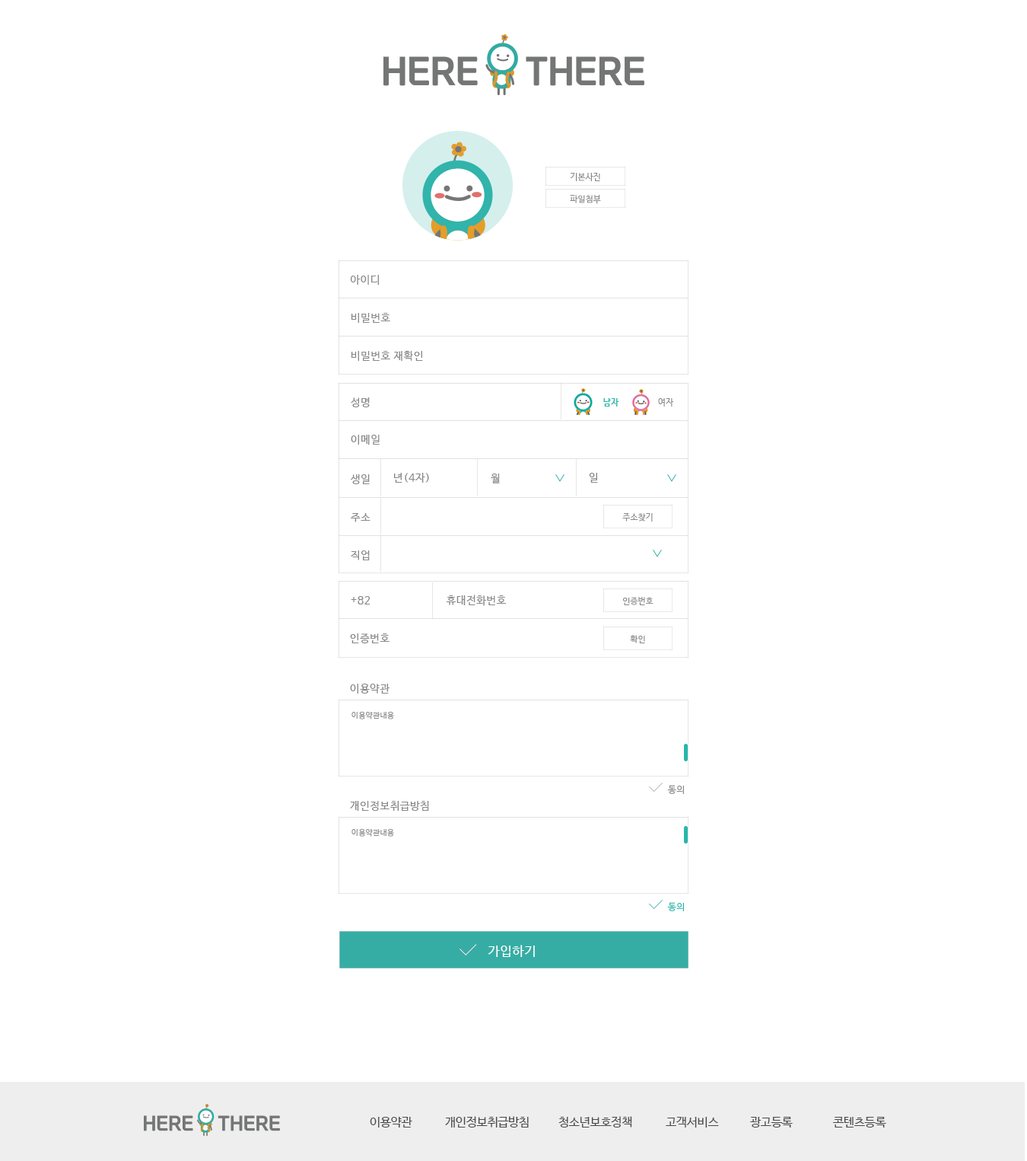
<style>
.page{position:relative;width:1027px;height:1161px;background:#ffffff}
.page>*{position:absolute;margin:0}
.t1{font:8.4px "NanumBarunGothic";letter-spacing:0.025em;color:#898989}
.t2{font:10.7px "NanumBarunGothic";letter-spacing:0.05em;color:#898989}
.t3{font:8.4px "NanumBarunGothicBold";letter-spacing:0.05em;color:#25b7aa}
.t4{font:8.4px "NanumBarunGothic";letter-spacing:0.05em;color:#898989}
.t5{font:7.6px "NanumBarunGothic";letter-spacing:0.05em;color:#898989}
.t6{font:9.1px "NanumBarunGothic";letter-spacing:0.05em;color:#898989}
.t7{font:9.1px "NanumBarunGothic";letter-spacing:0.05em;color:#25b7aa}
.t8{font:12.9px "NanumBarunGothic";letter-spacing:0.05em;color:#ffffff}
.t9{font:12.2px "NanumBarunGothic";letter-spacing:-0.025em;color:#4c4948}
</style>
<div class="page">
<p class="t1" style="left:570px;top:173px;width:30px;height:8px">기본사진</p>
<p class="t1" style="left:570px;top:195px;width:31px;height:9px">파일첨부</p>
<p class="t2" style="left:350px;top:275px;width:29px;height:10px">아이디</p>
<p class="t2" style="left:351px;top:313px;width:39px;height:10px">비밀번호</p>
<p class="t2" style="left:351px;top:350px;width:72px;height:11px">비밀번호 재확인</p>
<p class="t2" style="left:351px;top:397px;width:19px;height:10px">성명</p>
<p class="t3" style="left:604px;top:398px;width:15px;height:8px">남자</p>
<p class="t4" style="left:658px;top:398px;width:16px;height:8px">여자</p>
<p class="t2" style="left:351px;top:435px;width:29px;height:9px">이메일</p>
<p class="t2" style="left:394px;top:473px;width:35px;height:10px">년(4자)</p>
<p class="t2" style="left:491px;top:473px;width:9px;height:10px">월</p>
<p class="t2" style="left:589px;top:473px;width:9px;height:10px">일</p>
<p class="t2" style="left:351px;top:474px;width:19px;height:10px">생일</p>
<p class="t2" style="left:351px;top:513px;width:20px;height:9px">주소</p>
<p class="t1" style="left:623px;top:513px;width:30px;height:8px">주소찾기</p>
<p class="t2" style="left:351px;top:550px;width:19px;height:10px">직업</p>
<p class="t2" style="left:351px;top:596px;width:20px;height:8px">+82</p>
<p class="t2" style="left:446px;top:594px;width:61px;height:12px">휴대전화번호</p>
<p class="t1" style="left:623px;top:597px;width:31px;height:8px">인증번호</p>
<p class="t2" style="left:350px;top:633px;width:40px;height:11px">인증번호</p>
<p class="t1" style="left:630px;top:635px;width:15px;height:8px">확인</p>
<p class="t2" style="left:350px;top:683px;width:40px;height:10px">이용약관</p>
<p class="t5" style="left:352px;top:711px;width:42px;height:8px">이용약관내용</p>
<p class="t6" style="left:667px;top:785px;width:17px;height:9px">동의</p>
<p class="t2" style="left:350px;top:801px;width:79px;height:10px">개인정보취급방침</p>
<p class="t5" style="left:352px;top:828px;width:42px;height:8px">이용약관내용</p>
<p class="t7" style="left:667px;top:902px;width:17px;height:9px">동의</p>
<p class="t8" style="left:488px;top:944px;width:47px;height:13px">가입하기</p>
<p class="t9" style="left:370px;top:1116px;width:42px;height:11px">이용약관</p>
<p class="t9" style="left:445px;top:1116px;width:84px;height:11px">개인정보취급방침</p>
<p class="t9" style="left:559px;top:1116px;width:73px;height:11px">청소년보호정책</p>
<p class="t9" style="left:666px;top:1116px;width:53px;height:11px">고객서비스</p>
<p class="t9" style="left:750px;top:1116px;width:43px;height:11px">광고등록</p>
<p class="t9" style="left:833px;top:1116px;width:54px;height:11px">콘텐츠등록</p>
</div>
